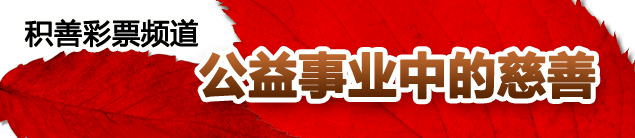
<style>
.page{position:relative;width:635px;height:138px}
.page>*{position:absolute;margin:0}
.t1{font:28px "MicrosoftYaHei";letter-spacing:0.01em;color:#000000;font-weight:bold}
.t2{font:48px "MicrosoftYaHei-Bold";letter-spacing:0.01em;font-weight:bold}
</style>
<div class="page">
<p class="t1" style="left:24px;top:19px;width:175px;height:29px">积善彩票频道</p>
<p class="t2" style="left:199px;top:50px;width:397px;height:50px">公益事业中的慈善</p>
</div>
